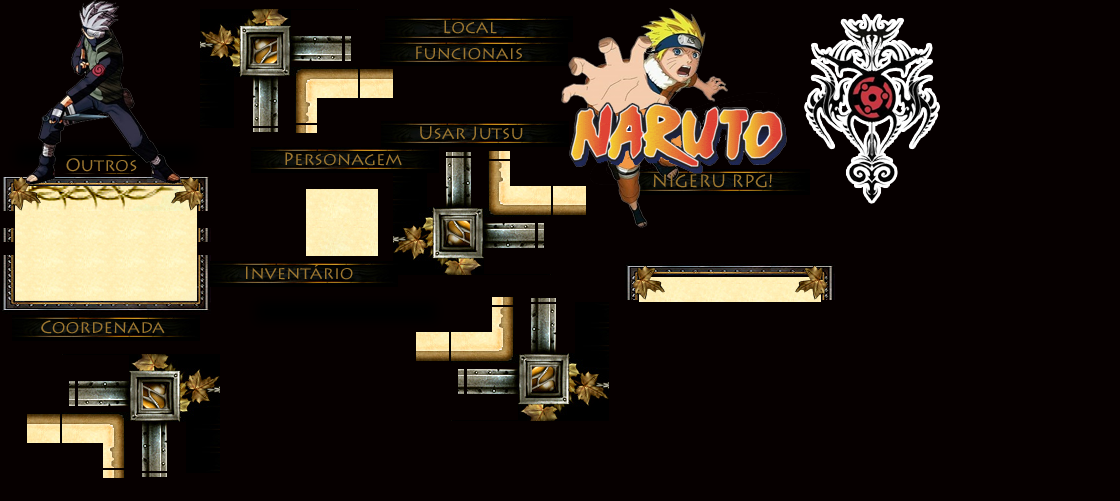
<style>
.page{position:relative;width:1120px;height:501px;background:#060000}
.page>*{position:absolute;margin:0}
.t1{font:18px "LithosPro-Regular";color:#9d7730}
</style>
<div class="page">
<p class="t1" style="left:444px;top:20px;width:53px;height:14px">Local</p>
<p class="t1" style="left:416px;top:46px;width:106px;height:14px">Funcionais</p>
<p class="t1" style="left:420px;top:126px;width:103px;height:15px">Usar Jutsu</p>
<p class="t1" style="left:66px;top:158px;width:71px;height:14px">Outros</p>
<p class="t1" style="left:285px;top:152px;width:117px;height:14px">Personagem</p>
<p class="t1" style="left:653px;top:173px;width:119px;height:15px">NIGERU RPG!</p>
<p class="t1" style="left:246px;top:264px;width:107px;height:16px">Inventário</p>
<p class="t1" style="left:41px;top:320px;width:124px;height:14px">Coordenada</p>
</div>
